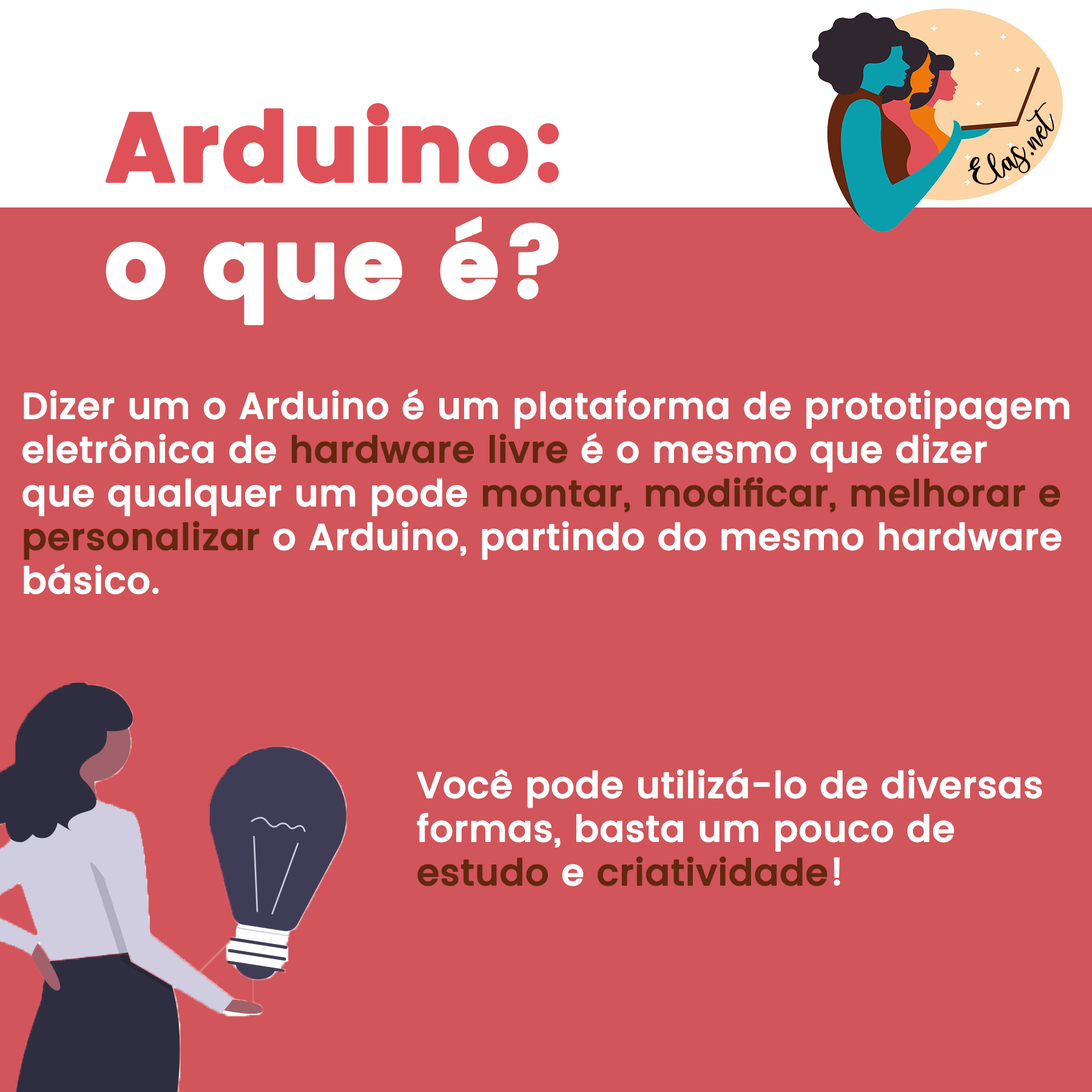
<style>
.page{position:relative;width:1092px;height:1092px;background:#d1555a}
.page>*{position:absolute;margin:0}
.t1{font:24.1px "charlinda-Regular";color:#000000;scale:1.18 1}
.t2{font:36.4px "Poppins-Medium";color:#ffffff;font-weight:bold}
.t3{font:36.4px "Poppins-Medium";color:#64270f;font-weight:bold}
</style>
<div class="page">
<p class="t1" style="left:968px;top:103px;width:86px;height:82px;rotate:-41deg">Elas.net</p>
<p class="t2" style="left:22px;top:389px;width:1048px;height:206px">Dizer um o Arduino é um plataforma de prototipagem<br>eletrônica de <span class="t3">hardware livre</span> é o mesmo que dizer <br>que qualquer um pode <span class="t3">montar, modificar, melhorar e<br>personalizar</span> o Arduino, partindo do mesmo hardware<br>básico.</p>
<p class="t2" style="left:417px;top:768px;width:625px;height:118px">Você pode utilizá-lo de diversas <br>formas, basta um pouco de <br><span class="t3">estudo</span> e <span class="t3">criatividade</span>!</p>
</div>
